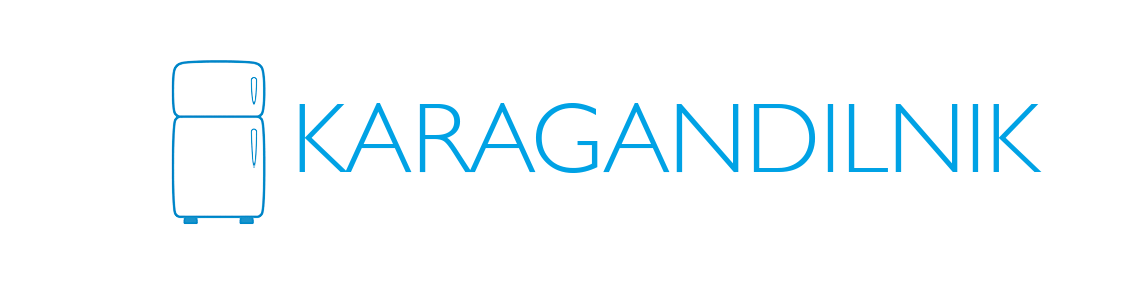
<style>
.page{position:relative;width:1141px;height:292px;background:#ffffff}
.page>*{position:absolute;margin:0}
.t1{font:100px "GillSans-Light";color:#00a2e5}
</style>
<div class="page">
<p class="t1" style="left:299px;top:103px;width:743px;height:70px">KARAGANDILNIK</p>
</div>
